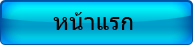
<style>
.page{position:relative;width:193px;height:45px}
.page>*{position:absolute;margin:0}
.t1{font:24px "Tahoma";color:#040404}
</style>
<div class="page">
<p class="t1" style="left:53px;top:12px;width:80px;height:18px">หน้าแรก</p>
</div>
